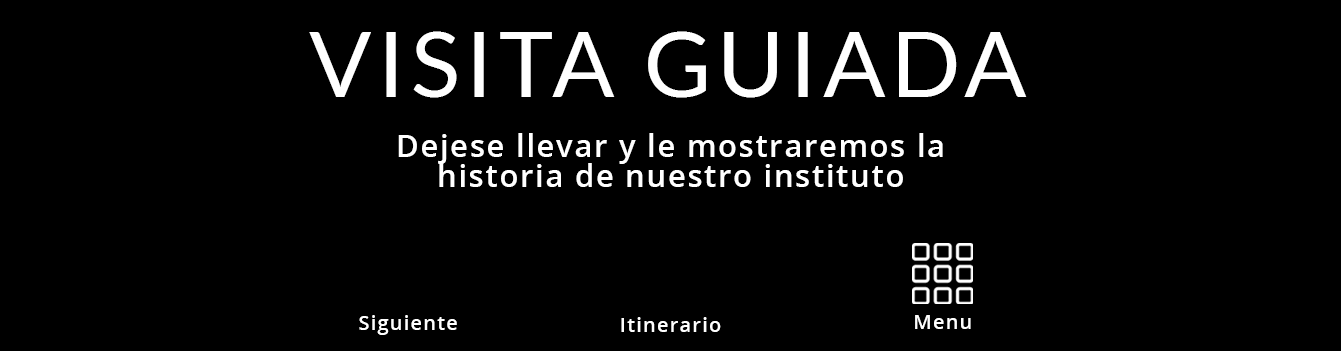
<style>
.page{position:relative;width:1341px;height:351px;background:#000000}
.page>*{position:absolute;margin:0}
.t1{font:92px "Lato-Regular";letter-spacing:0.06em;color:#ffffff}
.t2{font:30.7px/30.7px "OpenSans-Semibold";letter-spacing:0.06em;color:#ffffff}
.t3{font:20px "OpenSans-Semibold";letter-spacing:0.06em;color:#ffffff}
</style>
<div class="page">
<p class="t1" style="left:309px;top:31px;width:718px;height:67px">VISITA GUIADA</p>
<p class="t2" style="left:398px;top:133px;width:545px;height:54px;text-align:center">Dejese llevar y le mostraremos la<br>historia de nuestro instituto</p>
<p class="t3" style="left:359px;top:315px;width:98px;height:20px">Siguiente</p>
<p class="t3" style="left:621px;top:317px;width:100px;height:15px">Itinerario</p>
<p class="t3" style="left:915px;top:315px;width:56px;height:14px">Menu</p>
</div>
